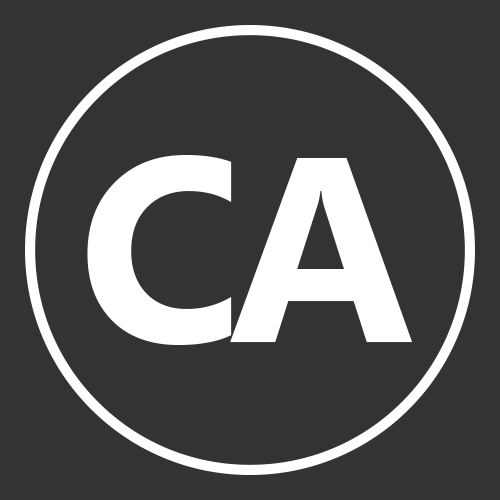
<style>
.page{position:relative;width:500px;height:500px;background:#333333}
.page>*{position:absolute;margin:0}
.t1{font:262.5px "Gadugi-Bold";letter-spacing:-0.05em;color:#ffffff}
</style>
<div class="page">
<p class="t1" style="left:87px;top:155px;width:326px;height:190px">CA</p>
</div>
